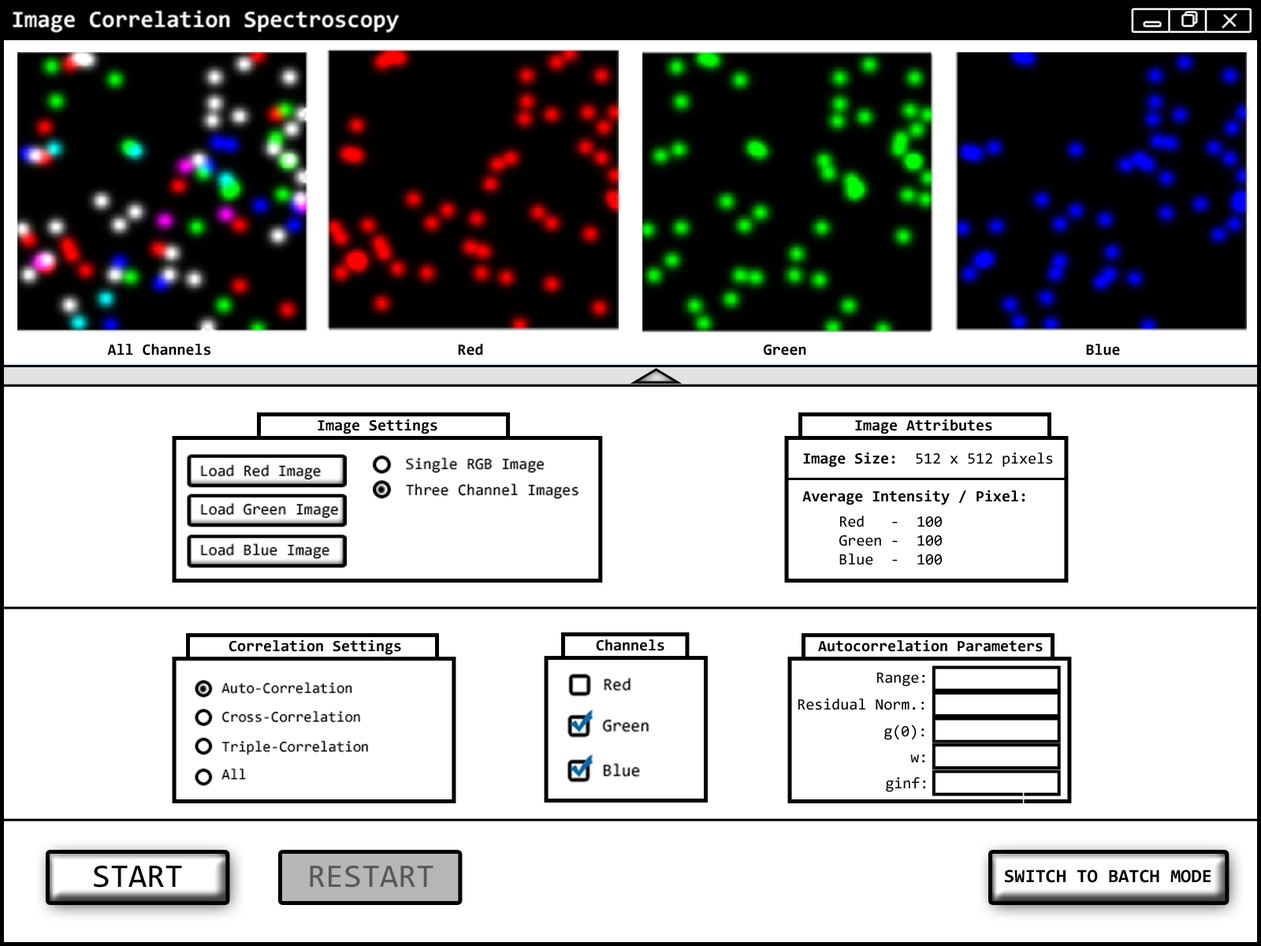
<style>
.page{position:relative;width:1261px;height:946px;background:#ffffff}
.page>*{position:absolute;margin:0}
.t1{font:15.8px "Consolas-Bold";color:#000000}
.t2{font:15.8px "Consolas";color:#000000}
.t3{font:33.1px "Consolas";color:#000000}
.t4{font:33.1px "Consolas";color:#595959}
.t5{font:18.9px "Consolas-Bold";color:#000000}
</style>
<div class="page">
<p class="t1" style="left:107px;top:344px;width:103px;height:11px">All Channels</p>
<p class="t1" style="left:458px;top:344px;width:25px;height:11px">Red</p>
<p class="t1" style="left:764px;top:344px;width:42px;height:11px">Green</p>
<p class="t1" style="left:1086px;top:344px;width:34px;height:11px">Blue</p>
<p class="t1" style="left:318px;top:418px;width:119px;height:16px">Image Settings</p>
<p class="t1" style="left:855px;top:418px;width:137px;height:16px">Image Attributes</p>
<p class="t1" style="left:802px;top:452px;width:251px;height:53px">Image Size:  <span class="t2">512 x 512 pixels<br></span><br>Average Intensity / Pixel:</p>
<p class="t2" style="left:839px;top:515px;width:103px;height:50px">Red   -  100<br>Green -  100<br>Blue  -  100</p>
<p class="t1" style="left:229px;top:639px;width:172px;height:16px">Correlation Settings</p>
<p class="t1" style="left:596px;top:639px;width:68px;height:12px">Channels</p>
<p class="t1" style="left:818px;top:639px;width:225px;height:13px">Autocorrelation Parameters</p>
<p class="t2" style="left:877px;top:672px;width:48px;height:14px">Range:</p>
<p class="t2" style="left:798px;top:698px;width:126px;height:12px">Residual Norm.:</p>
<p class="t2" style="left:884px;top:724px;width:40px;height:16px">g(0):</p>
<p class="t2" style="left:910px;top:754px;width:15px;height:9px">w:</p>
<p class="t2" style="left:886px;top:777px;width:40px;height:15px">ginf:</p>
<p class="t3" style="left:94px;top:865px;width:88px;height:22px">START</p>
<p class="t4" style="left:310px;top:865px;width:123px;height:22px">RESTART</p>
<p class="t5" style="left:1005px;top:869px;width:205px;height:14px">SWITCH TO BATCH MODE</p>
</div>
